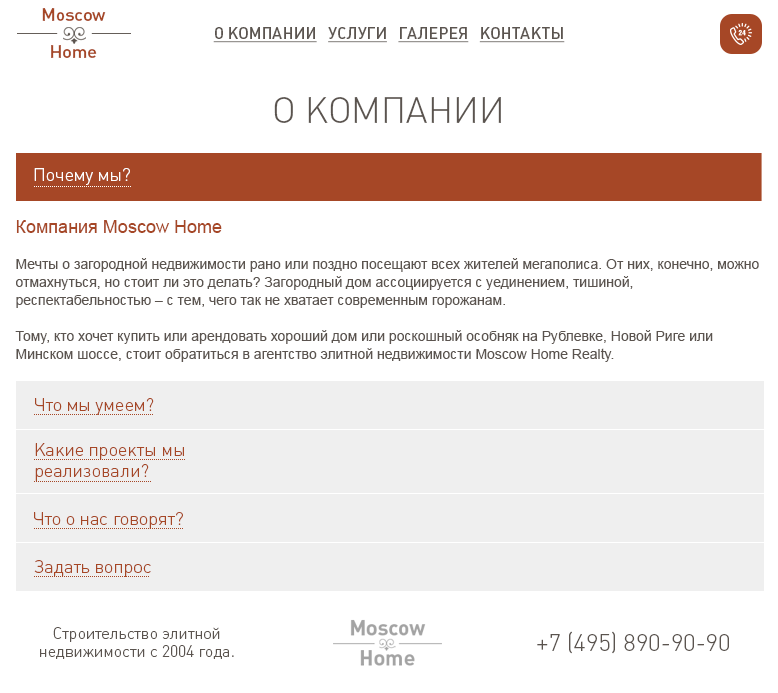
<style>
.page{position:relative;width:778px;height:693px;background:#ffffff}
.page>*{position:absolute;margin:0}
.t1{font:18px/32px "PlumbMediumC";color:#a64726}
.t2{font:16px "PlumbMediumC";color:#5b544f;text-transform:uppercase;text-decoration:underline}
.t3{font:36px/70px "PlumbLightC";color:#5b544f;text-transform:uppercase}
.t4{font:14px/18px "ArialMT";color:#ffffff}
.t5{font:18px "PlumbLightC";color:#ffffff}
.t6{font:14px/18px "ArialMT";color:#5b544f}
.t7{font:18px/18px "ArialMT";color:#a64726}
.t8{font:18px "PlumbLightC";color:#a64726}
.t9{font:16px/18px "PlumbLightC";color:#5b544f}
.t10{font:24px "PlumbLightC";color:#5b544f;text-transform:uppercase}
</style>
<div class="page">
<p class="t1" style="left:42px;top:8px;width:64px;height:50px;text-align:center">Moscow<br>Home</p>
<p class="t2" style="left:213px;top:27px;width:352px;height:16px">О компании   услуги   галерея   контакты</p>
<p class="t3" style="left:274px;top:97px;width:227px;height:26px;text-align:center">о компании<br><br><br><br><span class="t4">р</span></p>
<p class="t5" style="left:34px;top:168px;width:96px;height:17px">Почему мы?</p>
<p class="t6" style="left:15px;top:220px;width:744px;height:177px"><span class="t7">Компания Moscow Home<br><br></span>Мечты о загородной недвижимости рано или поздно посещают всех жителей мегаполиса. От них, конечно, можно отмахнуться, но стоит ли это делать? Загородный дом ассоциируется с уединением, тишиной, респектабельностью – с тем, чего так не хватает современным горожанам. <br><br>Тому, кто хочет купить или арендовать хороший дом или роскошный особняк на Рублевке, Новой Риге или Минском шоссе, стоит обратиться в агентство элитной недвижимости Moscow Home Realty. <span class="t4">Заручиться помощью специалистов в ответственном деле – разумный шаг, они точно знают, что нужно учесть при выборе недвижимости. Что же?</span></p>
<p class="t8" style="left:35px;top:398px;width:119px;height:17px">Что мы умеем?</p>
<p class="t8" style="left:35px;top:443px;width:149px;height:38px">Какие проекты мы реализовали?</p>
<p class="t8" style="left:34px;top:512px;width:149px;height:17px">Что о нас говорят?</p>
<p class="t8" style="left:34px;top:560px;width:117px;height:17px">Задать вопрос</p>
<p class="t9" style="left:40px;top:627px;width:194px;height:32px;text-align:center">Строительство элитной недвижимости c 2004 года.</p>
<p class="t10" style="left:537px;top:631px;width:192px;height:23px">+7 (495) 890-90-90</p>
</div>
